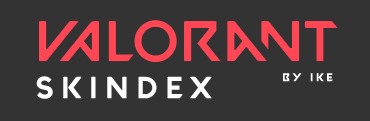
<style>
.page{position:relative;width:370px;height:121px;background:#333333}
.page>*{position:absolute;margin:0}
.t1{font:30px "VALORANT-Regular";letter-spacing:0.24em;color:#fffefe;font-weight:bold}
.t2{font:11px "VALORANT-Regular";letter-spacing:0.24em;color:#fffefe;font-weight:bold}
</style>
<div class="page">
<p class="t1" style="left:36px;top:76px;width:176px;height:23px">Skindex</p>
<p class="t2" style="left:283px;top:73px;width:50px;height:9px">By Ike</p>
</div>
